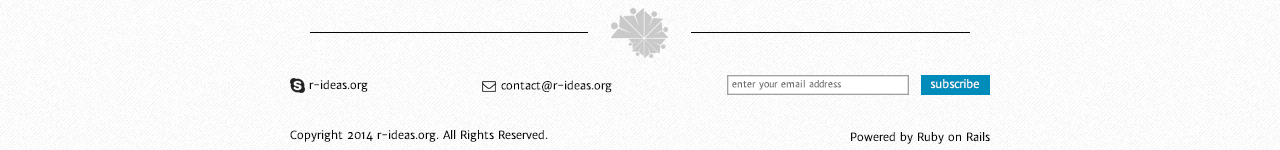
<style>
.page{position:relative;width:1280px;height:150px;background:#ffffff}
.page>*{position:absolute;margin:0}
.t1{font:11px "MerriweatherSans-Book";color:#060606}
.t2{font:9px "MerriweatherSans-Book";color:#6e6e6e}
.t3{font:11px "MerriweatherSans-Book";color:#fefefe}
</style>
<div class="page">
<p class="t1" style="left:309px;top:80px;width:59px;height:12px">r-ideas.org</p>
<p class="t1" style="left:501px;top:80px;width:111px;height:13px">contact@r-ideas.org</p>
<p class="t2" style="left:732px;top:80px;width:109px;height:10px">enter your email address</p>
<p class="t3" style="left:930px;top:79px;width:49px;height:10px">subscribe</p>
<p class="t1" style="left:290px;top:130px;width:258px;height:12px">Copyright 2014 r-ideas.org. All Rights Reserved.</p>
<p class="t1" style="left:851px;top:132px;width:139px;height:12px">Powered by Ruby on Rails</p>
</div>
